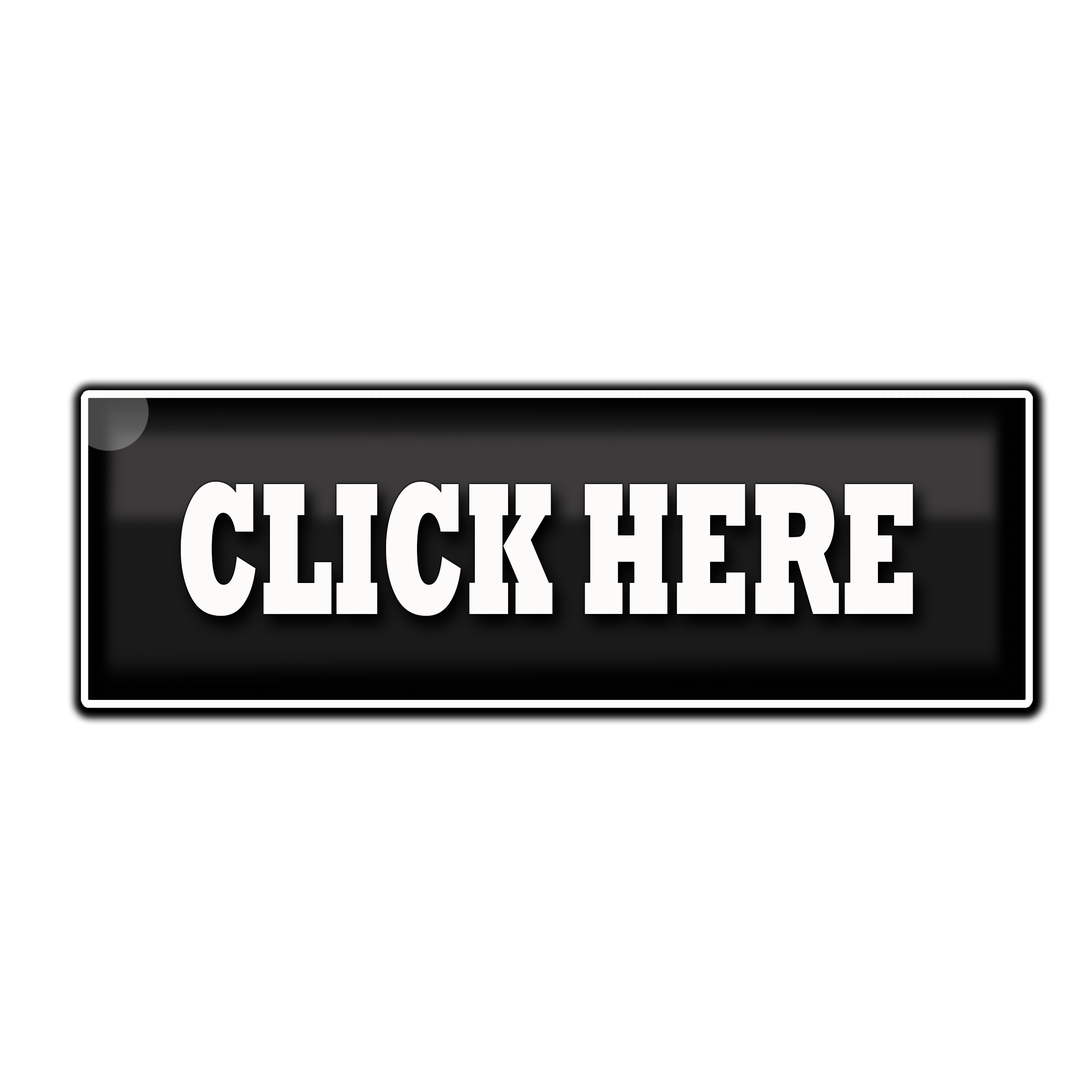
<style>
.page{position:relative;width:1092px;height:1092px;background:#ffffff}
.page>*{position:absolute;margin:0}
.t1{font:190.8px "Rockwell-ExtraBold";color:#fdfafa;scale:0.55 1}
</style>
<div class="page">
<p class="t1" style="left:181px;top:482px;width:732px;height:134px">CLICK HERE</p>
</div>
